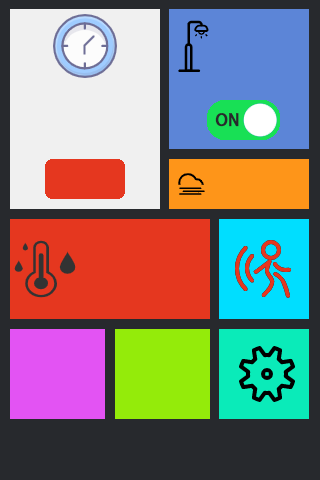
<style>
.page{position:relative;width:320px;height:480px;background:#27292d}
.page>*{position:absolute;margin:0}
.t1{font:16.7px "AdobeHeitiStd-Regular";color:#27292d;font-weight:bold}
</style>
<div class="page">
<p class="t1" style="left:215px;top:113px;width:24px;height:14px">ON</p>
</div>
